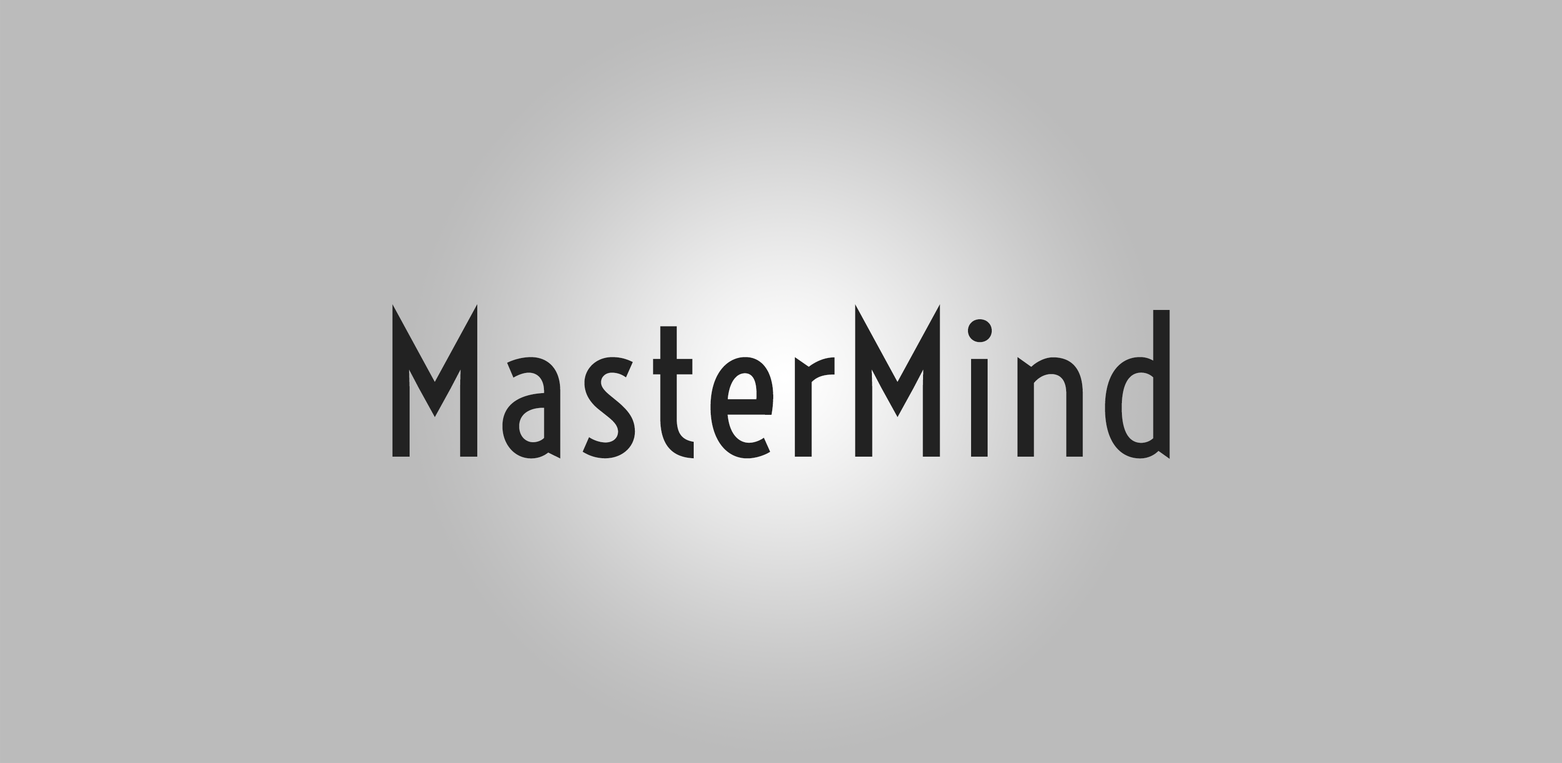
<style>
.page{position:relative;width:1562px;height:763px;background:#bbbbbb}
.page>*{position:absolute;margin:0}
.t1{font:188.4px "Voltaire";color:#222222}
</style>
<div class="page">
<p class="t1" style="left:392px;top:304px;width:778px;height:155px">MasterMind</p>
</div>
